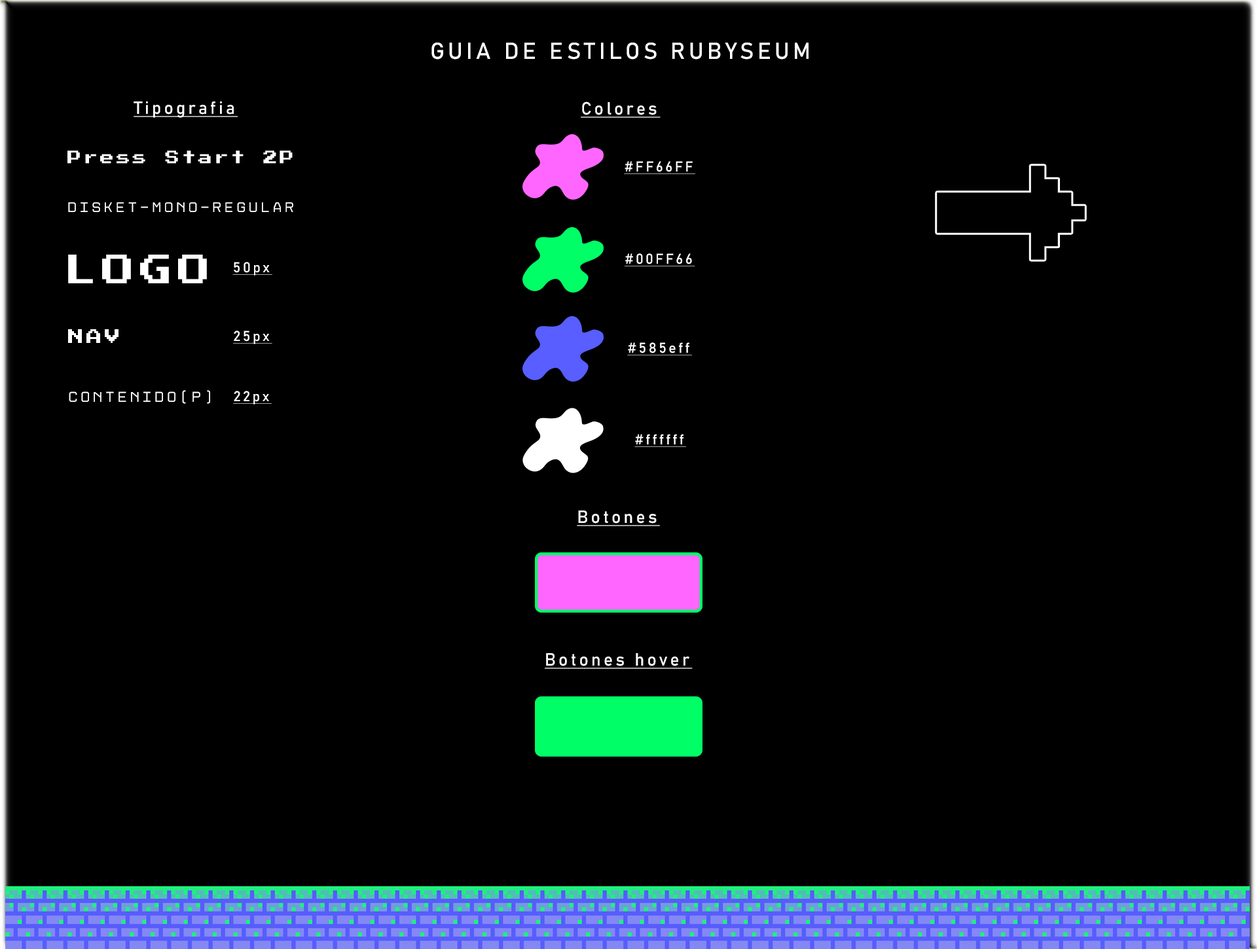
<style>
.page{position:relative;width:1257px;height:949px;background:#000000}
.page>*{position:absolute;margin:0}
.t1{font:22.9px "Bahnschrift";letter-spacing:0.16em;color:#ffffff}
.t2{font:17.4px "Bahnschrift";letter-spacing:0.16em;color:#ffffff;text-decoration:underline}
.t3{font:14.1px "PressStart2P-Regular";letter-spacing:0.16em;color:#ffffff}
.t4{font:14.1px "Bahnschrift";letter-spacing:0.16em;color:#ffffff;text-decoration:underline}
.t5{font:14.1px "DisketMono";letter-spacing:0.16em;color:#ffffff}
.t6{font:32.7px "PressStart2P-Regular";letter-spacing:0.16em;color:#ffffff}
.t7{font:15.7px "PressStart2P-Regular";letter-spacing:0.16em;color:#ffffff}
.t8{font:14.4px "DisketMono";letter-spacing:0.16em;color:#ffffff}
</style>
<div class="page">
<p class="t1" style="left:431px;top:43px;width:377px;height:17px">GUIA DE ESTILOS RUBYSEUM</p>
<p class="t2" style="left:134px;top:101px;width:104px;height:17px">Tipografia</p>
<p class="t2" style="left:581px;top:101px;width:79px;height:17px">Colores</p>
<p class="t3" style="left:67px;top:151px;width:226px;height:13px">Press Start 2P</p>
<p class="t4" style="left:624px;top:161px;width:71px;height:13px">#FF66FF</p>
<p class="t5" style="left:68px;top:202px;width:225px;height:10px">Disket-Mono-Regular</p>
<p class="t6" style="left:68px;top:255px;width:139px;height:28px">LOGO</p>
<p class="t4" style="left:624px;top:253px;width:71px;height:13px">#00FF66</p>
<p class="t4" style="left:232px;top:262px;width:40px;height:14px">50px</p>
<p class="t7" style="left:68px;top:329px;width:50px;height:14px">NAV</p>
<p class="t4" style="left:233px;top:331px;width:39px;height:13px">25px</p>
<p class="t4" style="left:627px;top:342px;width:65px;height:13px">#585eff</p>
<p class="t8" style="left:69px;top:390px;width:141px;height:14px">Contenido(p)</p>
<p class="t4" style="left:233px;top:391px;width:39px;height:13px">22px</p>
<p class="t4" style="left:634px;top:434px;width:52px;height:13px">#ffffff</p>
<p class="t2" style="left:577px;top:510px;width:83px;height:16px">Botones</p>
<p class="t2" style="left:545px;top:653px;width:147px;height:16px">Botones hover</p>
</div>
